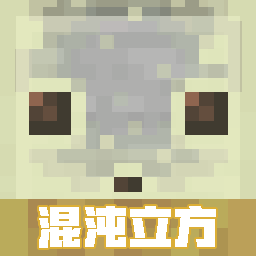
<style>
.page{position:relative;width:256px;height:256px}
.page>*{position:absolute;margin:0}
.t1{font:45.3px "HYLiLiangHeiJ";color:#ffffff}
</style>
<div class="page">
<p class="t1" style="left:39px;top:206px;width:177px;height:42px">混沌立方</p>
</div>
